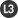
<style>
.page{position:relative;width:18px;height:18px;background:#363636}
.page>*{position:absolute;margin:0}
.t1{font:11px "Futura-Medium";color:#ededed}
</style>
<div class="page">
<p class="t1" style="left:3px;top:4px;width:11px;height:10px">L3</p>
</div>
